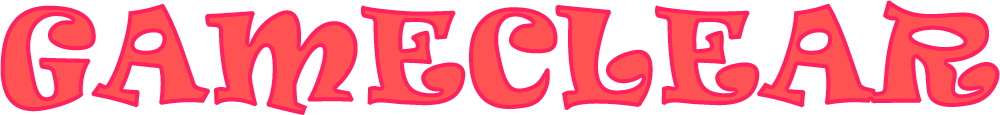
<style>
.page{position:relative;width:1000px;height:115px;background:#ffffff}
.page>*{position:absolute;margin:0}
.t1{font:119px "Ravie";font-weight:bold}
</style>
<div class="page">
<p class="t1" style="left:0px;top:0px;width:1000px;height:115px">GAMECLEAR</p>
</div>
